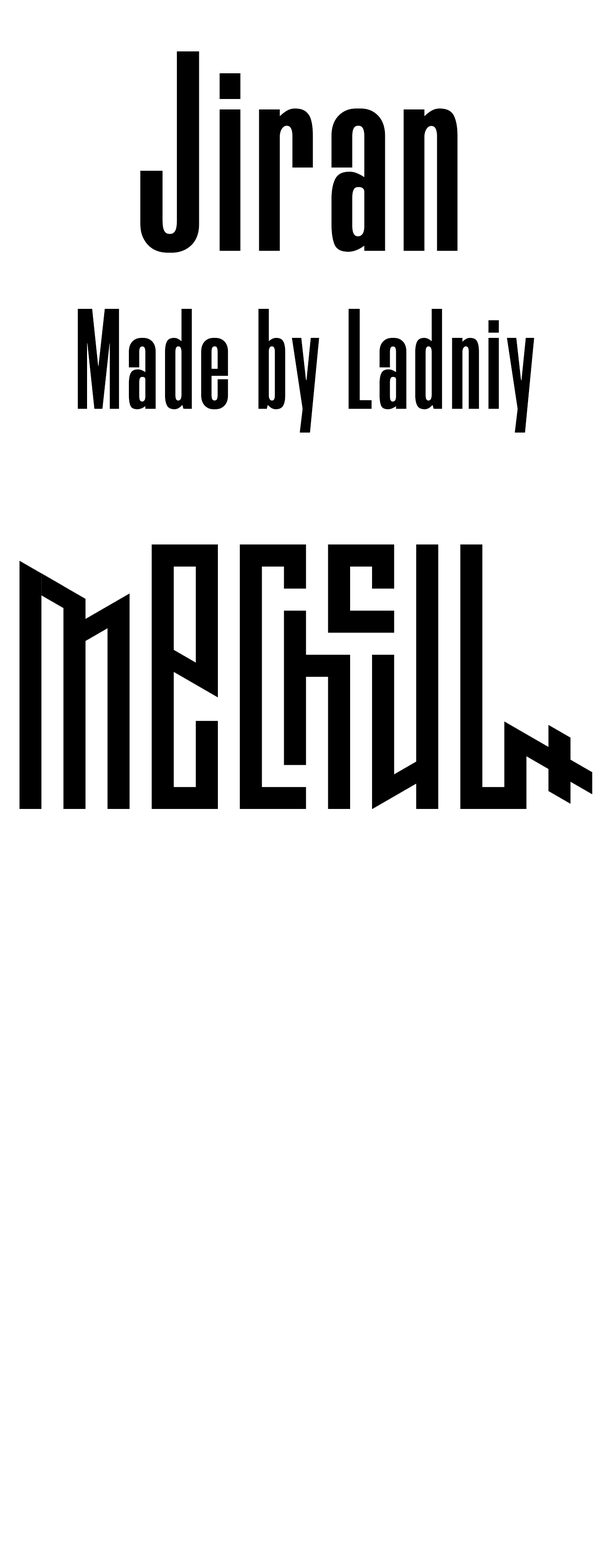
<style>
.page{position:relative;width:607px;height:1568px;background:#ffffff}
.page>*{position:absolute;margin:0}
.t1{font:285.5px "Morganite-Bold";letter-spacing:0.04em;color:#000000}
.t2{font:142.8px "Morganite-Bold";letter-spacing:0.04em;color:#000000}
</style>
<div class="page">
<p class="t1" style="left:140px;top:51px;width:318px;height:202px">Jiran</p>
<p class="t2" style="left:78px;top:309px;width:456px;height:124px">Made by Ladniy</p>
</div>
